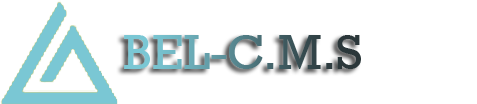
<style>
.page{position:relative;width:477px;height:104px;background:#ffffff}
.page>*{position:absolute;margin:0}
.t1{font:50px "Rockwell"}
</style>
<div class="page">
<p class="t1" style="left:124px;top:35px;width:237px;height:34px">BEL-C.M.S</p>
</div>
